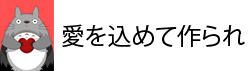
<style>
.page{position:relative;width:250px;height:71px;background:#ffffff}
.page>*{position:absolute;margin:0}
.t1{font:23.9px "KozGoPr6N-Regular";color:#000000}
</style>
<div class="page">
<p class="t1" style="left:62px;top:24px;width:183px;height:23px">愛を込めて作られ</p>
</div>
